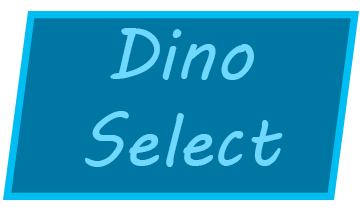
<style>
.page{position:relative;width:360px;height:216px;background:#0076a3}
.page>*{position:absolute;margin:0}
.t1{font:72px "MVBoli";color:#6ed9ff}
</style>
<div class="page">
<p class="t1" style="left:85px;top:28px;width:198px;height:139px;text-align:center">Dino<br>Select</p>
</div>
